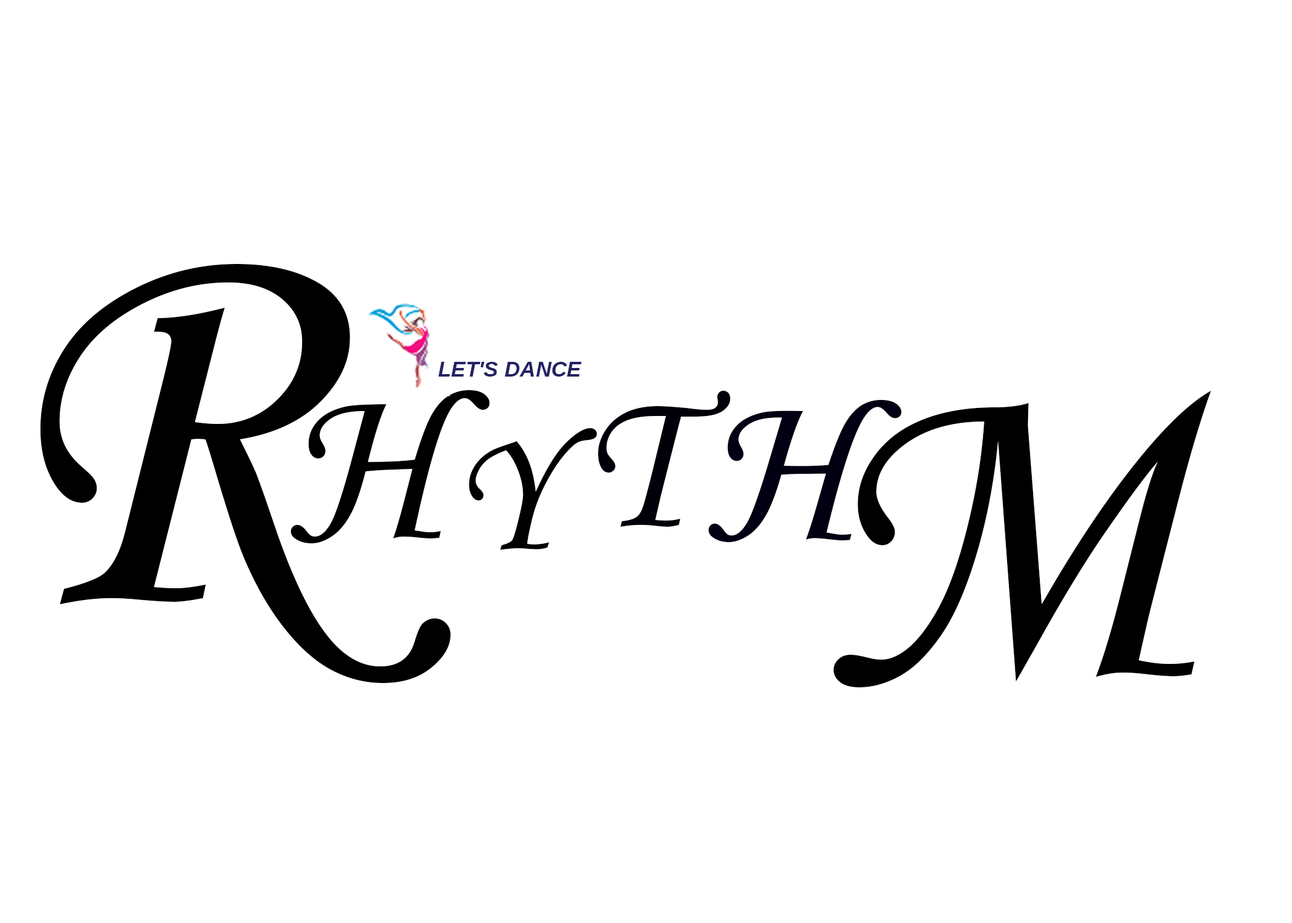
<style>
.page{position:relative;width:1292px;height:923px;background:#ffffff}
.page>*{position:absolute;margin:0}
.t1{font:569.3px "MonotypeCorsiva";color:#000000}
.t2{font:21.6px "Arimo-BoldItalic";color:#242263}
.t3{font:229.4px "MonotypeCorsiva";color:#000003}
.t4{font:202.9px "MonotypeCorsiva";color:#000008}
.t5{font:218.9px "MonotypeCorsiva";color:#010012}
.t6{font:458.3px "MonotypeCorsiva";color:#000000}
.t7{font:181px "MonotypeCorsiva";color:#000001}
</style>
<div class="page">
<p class="t1" style="left:40px;top:264px;width:411px;height:419px">R</p>
<p class="t2" style="left:438px;top:362px;width:144px;height:15px">LET'S DANCE</p>
<p class="t3" style="left:290px;top:390px;width:200px;height:153px">H</p>
<p class="t4" style="left:598px;top:391px;width:132px;height:136px">T</p>
<p class="t5" style="left:708px;top:399px;width:194px;height:144px;rotate:2deg">H</p>
<p class="t6" style="left:833px;top:391px;width:378px;height:296px">M</p>
<p class="t7" style="left:469px;top:428px;width:128px;height:122px;rotate:-1deg">Y</p>
</div>
